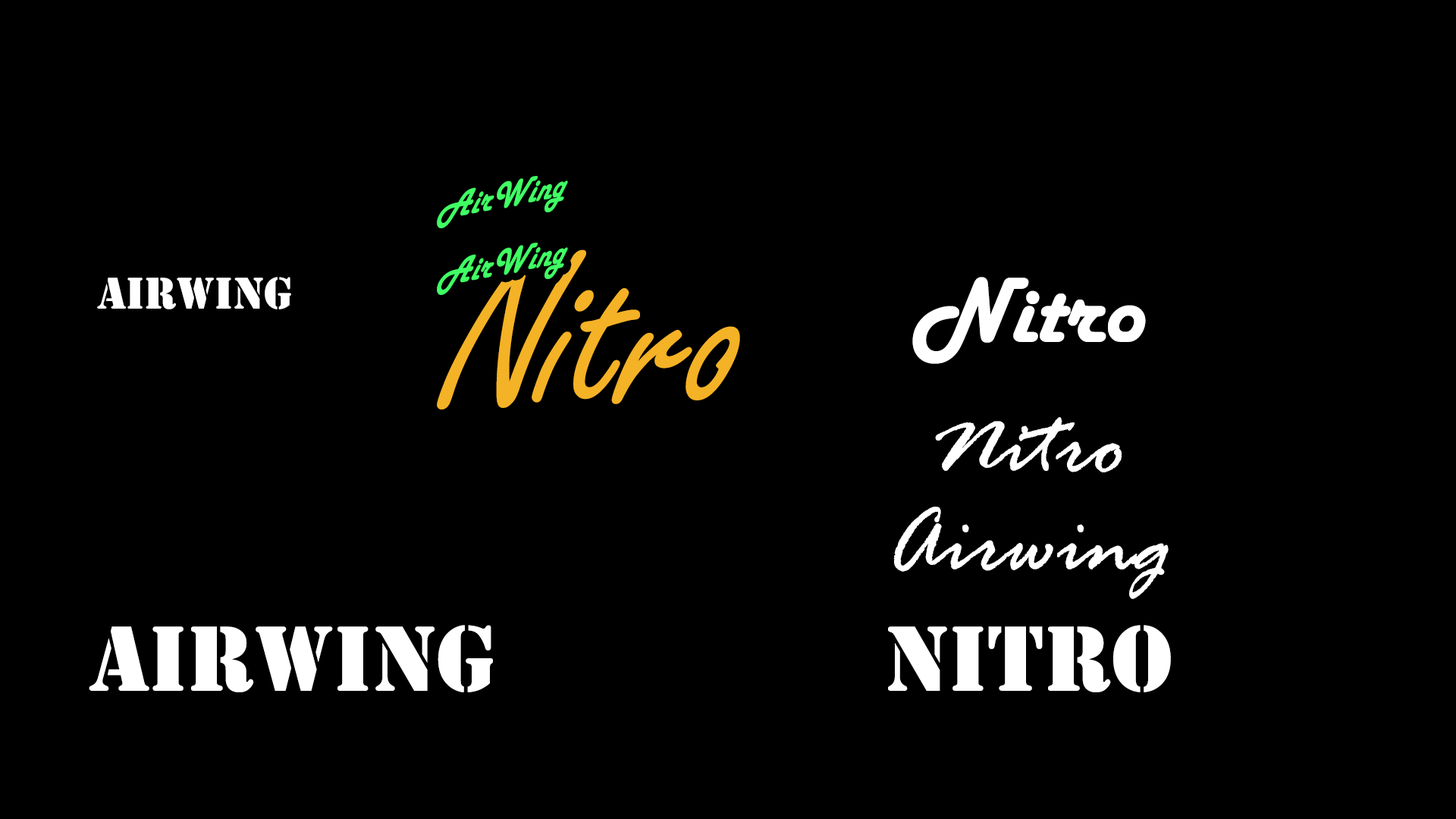
<style>
.page{position:relative;width:1456px;height:819px;background:#000000}
.page>*{position:absolute;margin:0}
.t1{font:40.7px "HarlowSolid";color:#40ff64;scale:0.77 1}
.t2{font:229.1px "FreestyleScript-Regular";color:#f4b226}
.t3{font:46.2px "Stencil";color:#ffffff}
.t4{font:96.3px "HarlowSolid";color:#ffffff}
.t5{font:96.3px "RageItalic";color:#ffffff}
.t6{font:96.3px "Stencil";color:#ffffff}
</style>
<div class="page">
<p class="t1" style="left:437px;top:176px;width:131px;height:52px;rotate:-11deg">AirWing</p>
<p class="t1" style="left:437px;top:243px;width:131px;height:52px;rotate:-11deg">AirWing</p>
<p class="t2" style="left:437px;top:249px;width:303px;height:160px">Nitro</p>
<p class="t3" style="left:97px;top:277px;width:194px;height:32px">AirWing</p>
<p class="t4" style="left:912px;top:277px;width:234px;height:87px">Nitro</p>
<p class="t5" style="left:935px;top:417px;width:187px;height:55px">Nitro</p>
<p class="t5" style="left:893px;top:507px;width:276px;height:92px">Airwing</p>
<p class="t6" style="left:89px;top:625px;width:404px;height:67px">AirWing</p>
<p class="t6" style="left:888px;top:625px;width:283px;height:67px">Nitro</p>
</div>
